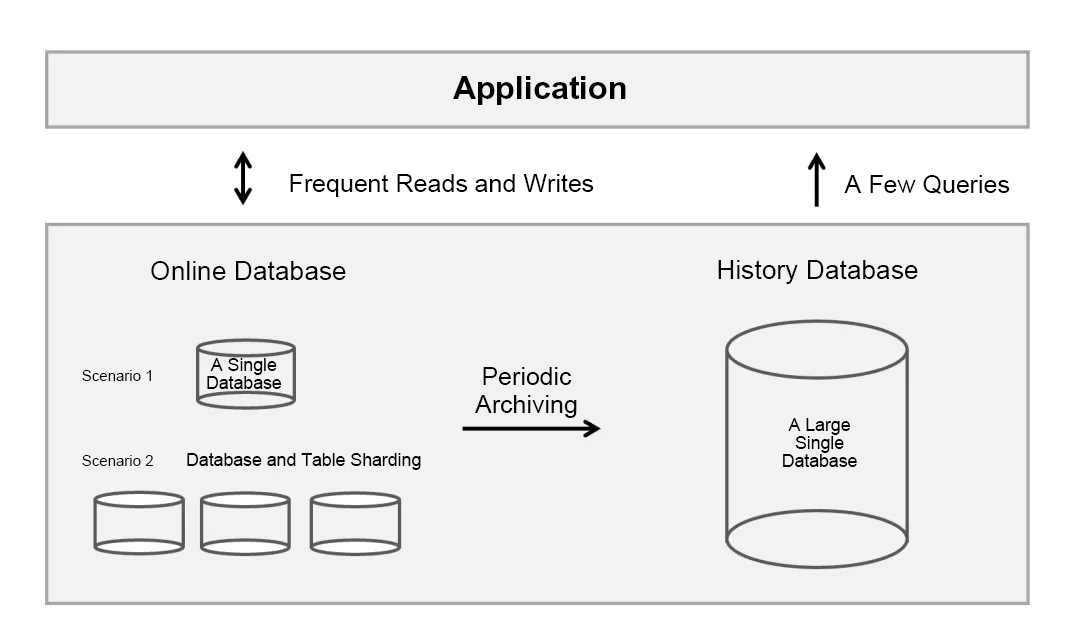
<style>
.page{position:relative;width:1080px;height:641px;background:#f2f2f2}
.page>*{position:absolute;margin:0}
.t1{font:32.1px "Arial-BoldMT";color:#000000}
.t2{font:25px "ArialMT";color:#000000}
.t3{font:26.4px "ArialMT";color:#000000}
.t4{font:17.7px/18px "ArialMT";color:#000000}
.t5{font:15px "ArialMT";color:#000000}
.t6{font:25px/28px "ArialMT";color:#000000}
.t7{font:17.7px "ArialMT";color:#000000}
</style>
<div class="page">
<p class="t1" style="left:453px;top:76px;width:173px;height:29px">Application</p>
<p class="t2" style="left:290px;top:174px;width:304px;height:23px">Frequent Reads and Writes</p>
<p class="t2" style="left:844px;top:175px;width:166px;height:19px">A Few Queries</p>
<p class="t3" style="left:151px;top:261px;width:195px;height:19px">Online Database</p>
<p class="t3" style="left:718px;top:260px;width:200px;height:24px">History Database</p>
<p class="t4" style="left:207px;top:358px;width:75px;height:31px;text-align:center">A Single<br>Database</p>
<p class="t5" style="left:82px;top:370px;width:69px;height:11px">Scenario 1</p>
<p class="t6" style="left:475px;top:367px;width:102px;height:51px;text-align:center">Periodic<br>Archiving</p>
<p class="t4" style="left:783px;top:418px;width:74px;height:49px;text-align:center">A Large<br>Single<br>Database</p>
<p class="t5" style="left:82px;top:455px;width:71px;height:11px">Scenario 2</p>
<p class="t7" style="left:187px;top:453px;width:234px;height:17px">Database and Table Sharding</p>
</div>
